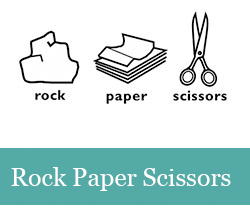
<style>
.page{position:relative;width:250px;height:213px;background:#ffffff}
.page>*{position:absolute;margin:0}
.t1{font:25px "Georgia";color:#ffffff}
</style>
<div class="page">
<p class="t1" style="left:11px;top:167px;width:220px;height:24px">Rock Paper Scissors</p>
</div>
